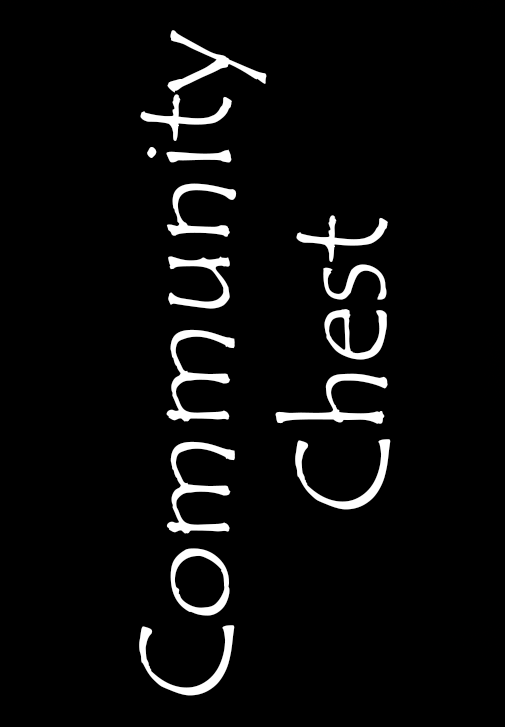
<style>
.page{position:relative;width:505px;height:727px;background:#000000}
.page>*{position:absolute;margin:0}
.t1{font:130px "TempusSansITC";color:#ffffff}
</style>
<div class="page">
<p class="t1" style="left:139px;top:30px;width:252px;height:666px;text-align:center;rotate:-90deg">Community <br>Chest</p>
</div>
